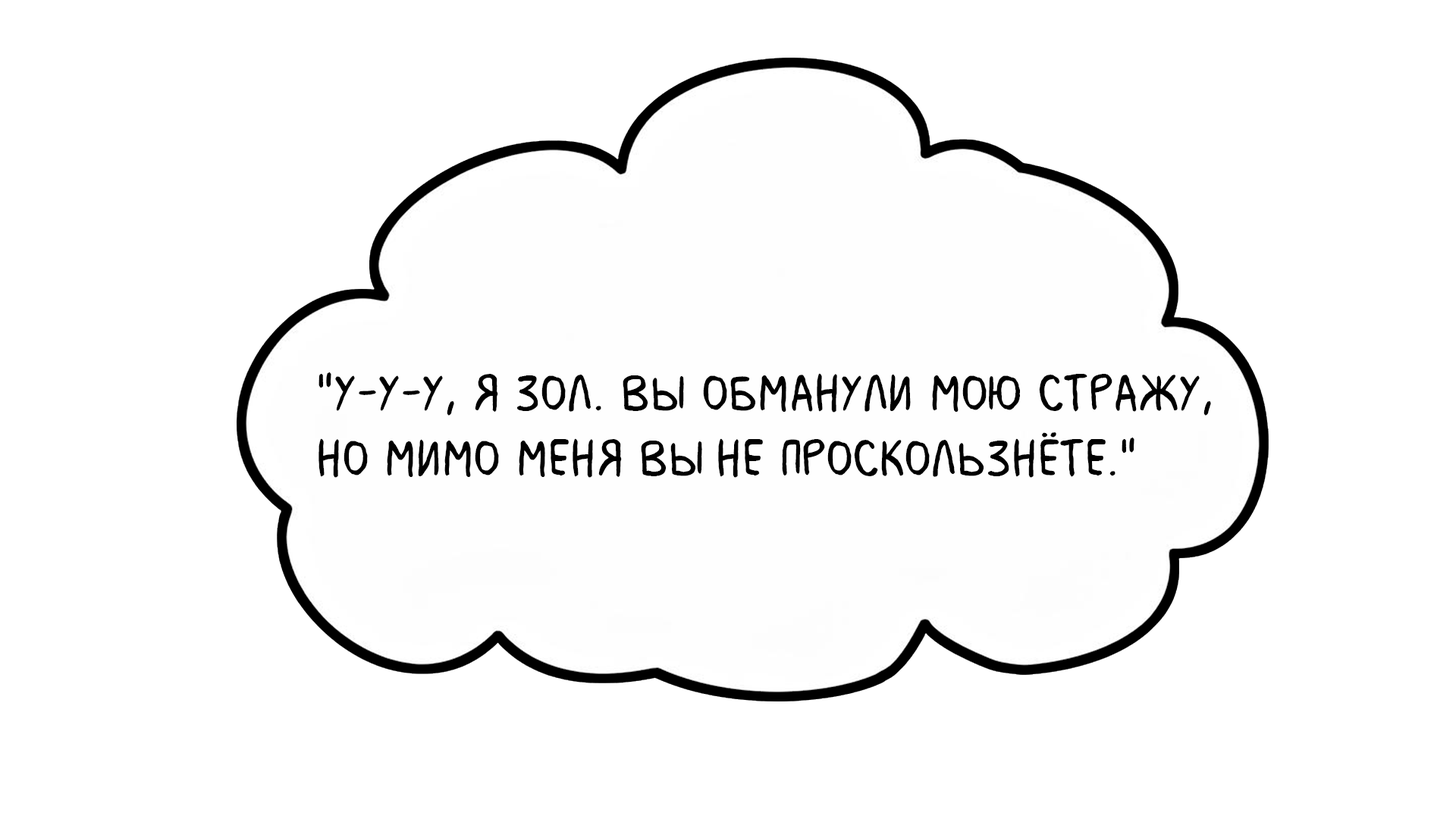
<style>
.page{position:relative;width:1456px;height:819px;background:#ffffff}
.page>*{position:absolute;margin:0}
.t1{font:54.6px "MilkMustacheBB";color:#000000}
</style>
<div class="page">
<p class="t1" style="left:318px;top:372px;width:893px;height:106px">"У-у-у, я зол. Вы обманули мою стражу, <br>но мимо меня вы не проскользнёте."</p>
</div>
